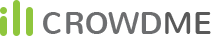
<style>
.page{position:relative;width:211px;height:36px;background:#ffffff}
.page>*{position:absolute;margin:0}
.t1{font:31.2px "Nunito-Regular";color:#6d6e70;text-transform:uppercase}
.t2{font:31.2px "Nunito-Regular";color:#595959;text-transform:uppercase}
</style>
<div class="page">
<p class="t1" style="left:43px;top:12px;width:168px;height:22px">Crowd<span class="t2">me</span></p>
</div>
